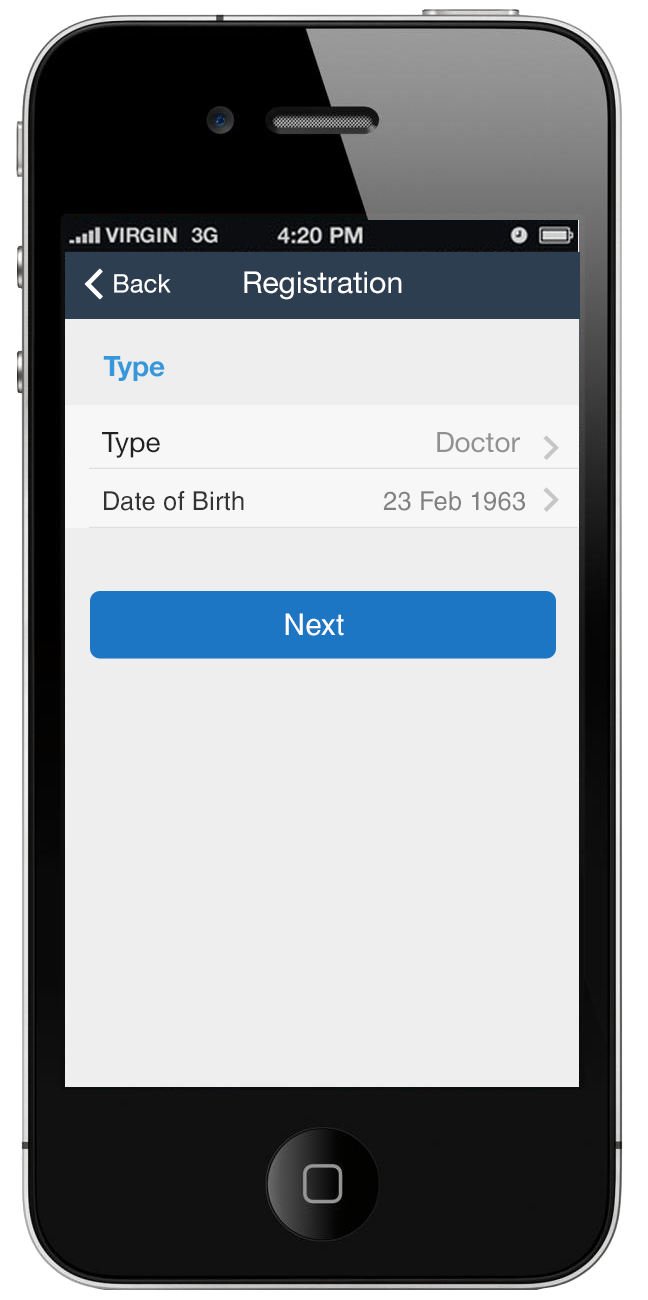
<style>
.page{position:relative;width:648px;height:1300px;background:#eeeeee}
.page>*{position:absolute;margin:0}
.t1{font:25.5px "HelveticaNeue";color:#ffffff}
.t2{font:30px "HelveticaNeue";color:#ffffff}
.t3{font:28px "HelveticaNeue-Bold";color:#3498db}
.t4{font:28px "HelveticaNeue";color:#919191}
.t5{font:28px "HelveticaNeue";color:#212121}
.t6{font:26px "HelveticaCyr-Upright";color:#333333}
.t7{font:26px "HelveticaCyr-Upright";color:#808080}
.t8{font:30px "HelveticaCyr-Upright";color:#ffffff}
</style>
<div class="page">
<p class="t1" style="left:114px;top:274px;width:57px;height:19px">Back</p>
<p class="t2" style="left:244px;top:271px;width:158px;height:29px">Registration</p>
<p class="t3" style="left:103px;top:356px;width:62px;height:25px">Type</p>
<p class="t4" style="left:102px;top:432px;width:418px;height:26px"><span class="t5">Type                    </span>Doctor</p>
<p class="t6" style="left:104px;top:491px;width:421px;height:20px">Date of Birth            <span class="t7">23 Feb 1963</span></p>
<p class="t8" style="left:285px;top:613px;width:59px;height:23px">Next</p>
</div>
